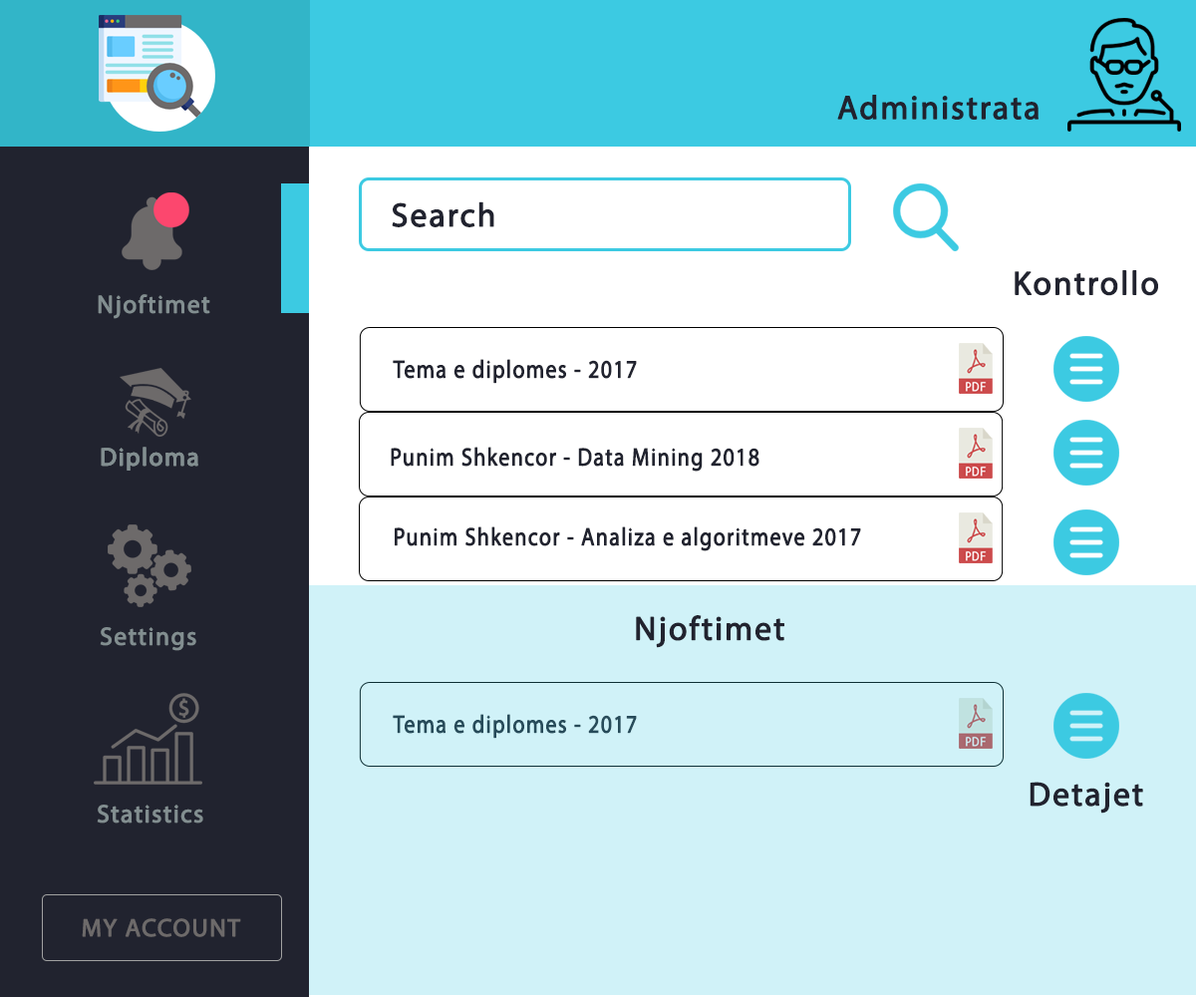
<style>
.page{position:relative;width:1196px;height:997px;background:#ffffff}
.page>*{position:absolute;margin:0}
.t1{font:33.2px "MyriadPro-Regular";letter-spacing:0.04em;color:#21232f;font-weight:bold}
.t2{font:24.9px "MyriadPro-Regular";letter-spacing:0.04em;color:#828e90;font-weight:bold}
.t3{font:24.9px "MyriadPro-Regular";letter-spacing:0.04em;color:#21232f;font-weight:bold;scale:0.87 1}
.t4{font:24.9px "MyriadPro-Regular";letter-spacing:0.04em;color:#274b5a;font-weight:bold;scale:0.87 1}
.t5{font:24.9px "MyriadPro-Regular";letter-spacing:0.04em;color:#6d6a6a;font-weight:bold}
</style>
<div class="page">
<p class="t1" style="left:837px;top:95px;width:202px;height:25px">Administrata</p>
<p class="t1" style="left:392px;top:201px;width:102px;height:26px">Search</p>
<p class="t1" style="left:1015px;top:270px;width:143px;height:26px">Kontrollo</p>
<p class="t2" style="left:98px;top:294px;width:112px;height:25px">Njoftimet</p>
<p class="t3" style="left:393px;top:359px;width:244px;height:25px">Tema e diplomes - 2017</p>
<p class="t2" style="left:101px;top:447px;width:97px;height:24px">Diploma</p>
<p class="t2" style="left:101px;top:447px;width:97px;height:24px">Diploma</p>
<p class="t3" style="left:391px;top:447px;width:369px;height:25px">Punim Shkencor - Data Mining 2018</p>
<p class="t3" style="left:395px;top:526px;width:466px;height:25px">Punim Shkencor - Analiza e algoritmeve 2017</p>
<p class="t1" style="left:636px;top:615px;width:149px;height:33px">Njoftimet</p>
<p class="t2" style="left:100px;top:627px;width:96px;height:24px">Settings</p>
<p class="t4" style="left:393px;top:714px;width:244px;height:25px">Tema e diplomes - 2017</p>
<p class="t1" style="left:1030px;top:782px;width:113px;height:31px">Detajet</p>
<p class="t2" style="left:97px;top:804px;width:106px;height:19px">Statistics</p>
<p class="t5" style="left:82px;top:918px;width:159px;height:19px">MY ACCOUNT</p>
</div>
